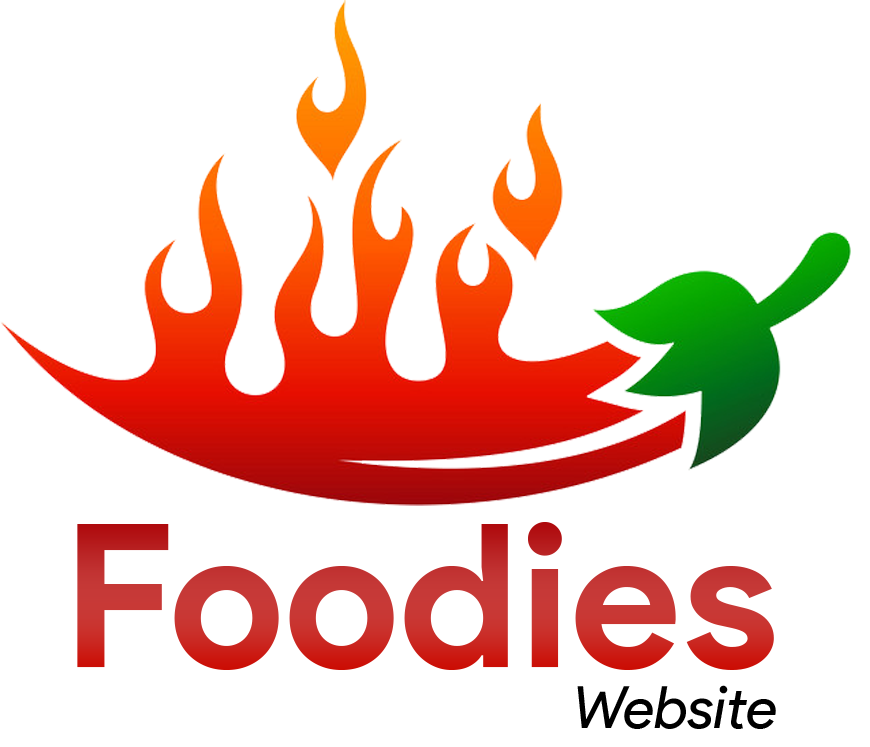
<style>
.page{position:relative;width:870px;height:747px;background:#ffffff}
.page>*{position:absolute;margin:0}
.t1{font:200px "ProductSans-Bold";color:#c83330}
.t2{font:58.3px "ProductSans-Italic";color:#000000}
</style>
<div class="page">
<p class="t1" style="left:77px;top:522px;width:697px;height:148px">Foodies</p>
<p class="t2" style="left:577px;top:685px;width:199px;height:44px">Website</p>
</div>
